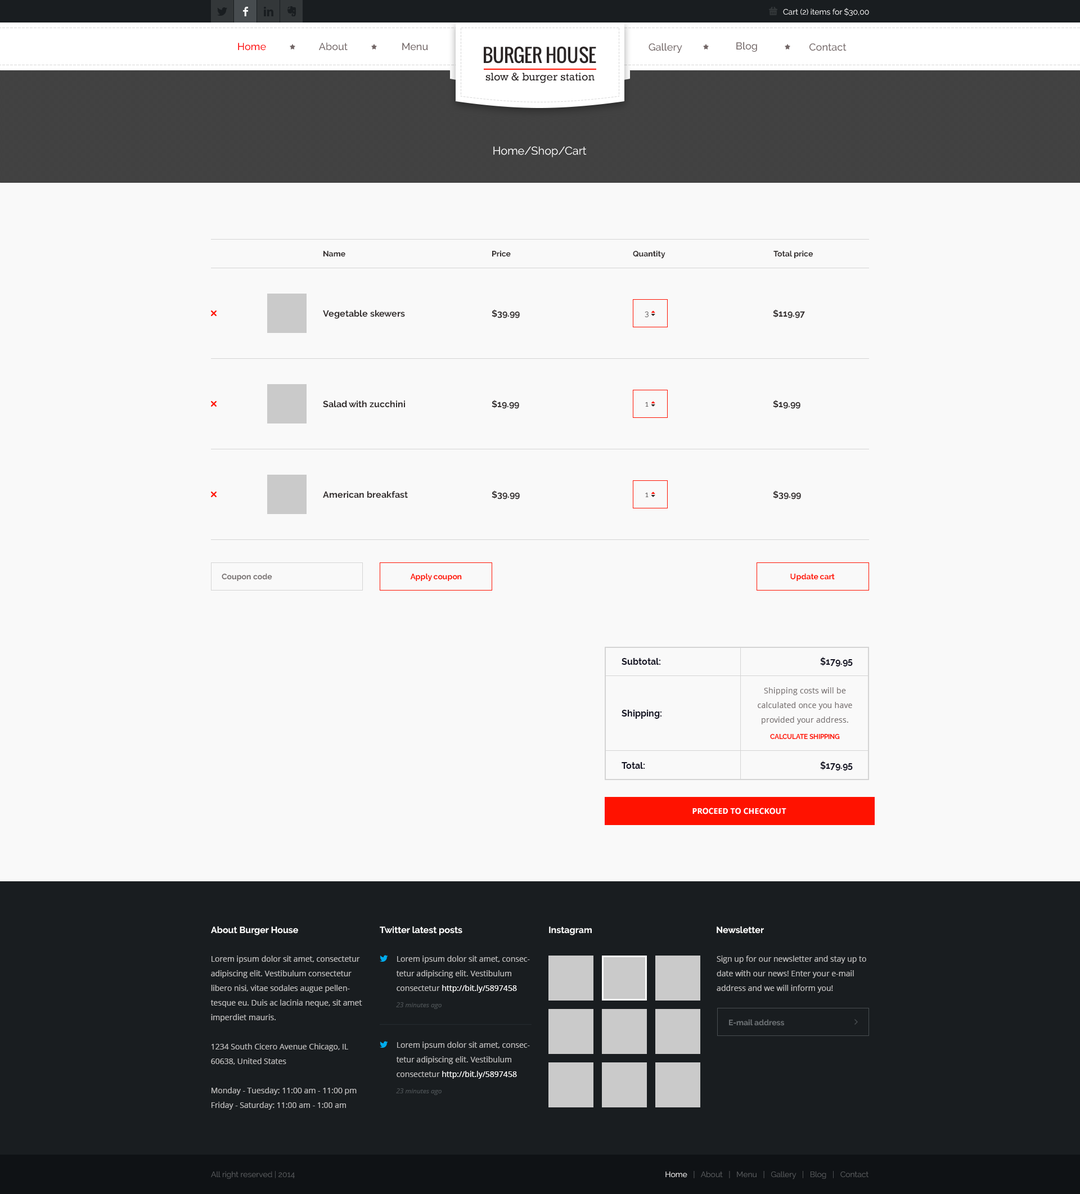
<style>
.page{position:relative;width:1080px;height:1194px;background:#f9f9f9}
.page>*{position:absolute;margin:0}
.t1{font:7.9px "Raleway-Regular";color:#ffffff}
.t2{font:10.1px "Raleway-Medium";color:#726666}
.t3{font:10.1px "Raleway-Medium";color:#fe0000}
.t4{font:18.6px "Oswald";color:#2a2525}
.t5{font:11.2px "Rockwell";color:#2a2525}
.t6{font:11.2px "Raleway-Regular";color:#ffffff}
.t7{font:7.9px "Raleway-Bold";color:#322d2d}
.t8{font:9px "Raleway-Bold";color:#322d2d}
.t9{font:7.9px "Raleway-Regular"}
.t10{font:7.9px "Raleway-Bold";color:#767070}
.t11{font:7.9px "Raleway-Bold";color:#ff1200}
.t12{font:9px "Raleway-Bold";color:#161625}
.t13{font:7.9px/14.6px "OpenSans";color:#767070}
.t14{font:6.8px "Raleway-Bold";color:#ff1200}
.t15{font:7.9px "OpenSans-Bold";color:#ffffff}
.t16{font:9px "Raleway-Bold";color:#fefefe}
.t17{font:7.9px/14.6px "OpenSans";color:#bdbcbc}
.t18{font:7.9px/14.6px "OpenSans";color:#ffffff}
.t19{font:6.8px "OpenSans-Italic";color:#494e51}
.t20{font:7.9px "Raleway-Bold";color:#6a6f72}
.t21{font:7.9px "Raleway";color:#5d6062}
.t22{font:7.9px "Raleway";color:#ffffff}
</style>
<div class="page">
<p class="t1" style="left:783px;top:8px;width:86px;height:8px">Cart (2) items for $30,00</p>
<p class="t2" style="left:736px;top:42px;width:21px;height:10px">Blog</p>
<p class="t3" style="left:238px;top:43px;width:28px;height:8px">Home</p>
<p class="t2" style="left:319px;top:42px;width:29px;height:9px">About</p>
<p class="t2" style="left:402px;top:43px;width:26px;height:8px">Menu</p>
<p class="t4" style="left:484px;top:46px;width:112px;height:18px">BURGER HOUSE</p>
<p class="t2" style="left:649px;top:43px;width:33px;height:10px">Gallery</p>
<p class="t2" style="left:809px;top:43px;width:38px;height:8px">Contact</p>
<p class="t5" style="left:485px;top:73px;width:110px;height:10px">slow &amp; burger station</p>
<p class="t6" style="left:493px;top:146px;width:94px;height:12px">Home/Shop/Cart</p>
<p class="t7" style="left:323px;top:251px;width:22px;height:6px">Name</p>
<p class="t7" style="left:492px;top:250px;width:19px;height:7px">Price</p>
<p class="t7" style="left:633px;top:250px;width:32px;height:9px">Quantity</p>
<p class="t7" style="left:773px;top:250px;width:40px;height:8px">Total price</p>
<p class="t8" style="left:323px;top:310px;width:82px;height:9px">Vegetable skewers</p>
<p class="t8" style="left:492px;top:309px;width:28px;height:9px">$39.99</p>
<p class="t9" style="left:645px;top:312px;width:4px;height:5px">3</p>
<p class="t8" style="left:773px;top:309px;width:32px;height:9px">$119.97</p>
<p class="t8" style="left:323px;top:401px;width:82px;height:7px">Salad with zucchini</p>
<p class="t8" style="left:492px;top:400px;width:27px;height:9px">$19.99</p>
<p class="t8" style="left:773px;top:400px;width:27px;height:9px">$19.99</p>
<p class="t9" style="left:645px;top:402px;width:4px;height:5px">1</p>
<p class="t8" style="left:323px;top:491px;width:85px;height:7px">American breakfast</p>
<p class="t8" style="left:492px;top:491px;width:28px;height:9px">$39.99</p>
<p class="t9" style="left:645px;top:493px;width:4px;height:4px">1</p>
<p class="t8" style="left:773px;top:491px;width:28px;height:9px">$39.99</p>
<p class="t10" style="left:222px;top:573px;width:50px;height:8px">Coupon code</p>
<p class="t11" style="left:410px;top:573px;width:52px;height:9px">Apply coupon</p>
<p class="t11" style="left:790px;top:573px;width:45px;height:8px">Update cart</p>
<p class="t12" style="left:622px;top:658px;width:38px;height:7px">Subtotal:</p>
<p class="t12" style="left:820px;top:657px;width:33px;height:10px">$179.95</p>
<p class="t13" style="left:758px;top:687px;width:94px;height:38px;text-align:center">Shipping costs will be<br>calculated once you have<br>provided your address.</p>
<p class="t12" style="left:622px;top:710px;width:40px;height:9px">Shipping:</p>
<p class="t14" style="left:770px;top:734px;width:70px;height:5px">CALCULATE SHIPPING</p>
<p class="t12" style="left:820px;top:761px;width:33px;height:10px">$179.95</p>
<p class="t12" style="left:622px;top:762px;width:23px;height:7px">Total:</p>
<p class="t15" style="left:692px;top:808px;width:94px;height:7px">PROCEED TO CHECKOUT</p>
<p class="t16" style="left:211px;top:926px;width:87px;height:9px">About Burger House</p>
<p class="t16" style="left:380px;top:926px;width:82px;height:9px">Twitter latest posts</p>
<p class="t16" style="left:549px;top:926px;width:43px;height:9px">Instagram</p>
<p class="t16" style="left:717px;top:926px;width:47px;height:8px">Newsletter</p>
<p class="t17" style="left:210px;top:956px;width:152px;height:154px">Lorem ipsum dolor sit amet, consectetur adipiscing elit. Vestibulum consectetur libero nisi, vitae sodales augue pellentesque eu. Duis ac lacinia neque, sit amet imperdiet mauris. <br><br>1234 South Cicero Avenue Chicago, IL 60638, United States<br><br>Monday - Tuesday: 11:00 am - 11:00 pm<br>Friday - Saturday: 11:00 am - 1:00 am</p>
<p class="t17" style="left:396px;top:956px;width:134px;height:37px">Lorem ipsum dolor sit amet, consectetur adipiscing elit. Vestibulum consectetur <span class="t18">http://bit.ly/5897458</span></p>
<p class="t17" style="left:717px;top:956px;width:149px;height:37px">Sign up for our newsletter and stay up to date with our news! Enter your e-mail address and we will inform you!</p>
<p class="t19" style="left:396px;top:1002px;width:46px;height:7px">23 minutes ago</p>
<p class="t20" style="left:729px;top:1019px;width:55px;height:7px">E-mail address</p>
<p class="t17" style="left:396px;top:1042px;width:134px;height:37px">Lorem ipsum dolor sit amet, consectetur adipiscing elit. Vestibulum consectetur <span class="t18">http://bit.ly/5897458</span></p>
<p class="t19" style="left:396px;top:1088px;width:46px;height:7px">23 minutes ago</p>
<p class="t21" style="left:211px;top:1171px;width:84px;height:8px">All right reserved | 2014</p>
<p class="t21" style="left:665px;top:1171px;width:204px;height:9px"><span class="t22">Home   </span>|   About   |   Menu   |   Gallery   |   Blog   |   Contact</p>
</div>
